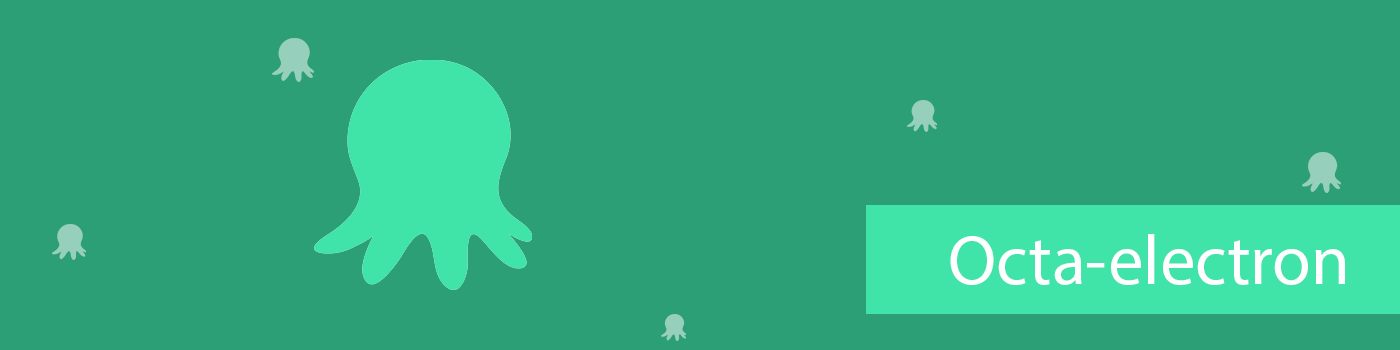
<style>
.page{position:relative;width:1400px;height:350px;background:#2d9f76}
.page>*{position:absolute;margin:0}
.t1{font:70px "MyriadPro-Regular";color:#ffffff}
</style>
<div class="page">
<p class="t1" style="left:950px;top:234px;width:395px;height:51px">Octa-electron</p>
</div>
